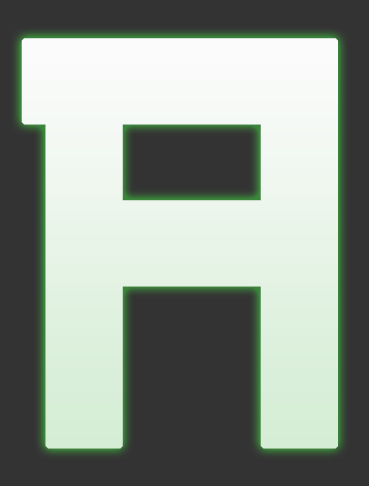
<style>
.page{position:relative;width:369px;height:486px;background:#333333}
.page>*{position:absolute;margin:0}
.t1{font:864px "journey";color:#fafafa;font-weight:bold;scale:0.89 1}
</style>
<div class="page">
<p class="t1" style="left:21px;top:38px;width:317px;height:411px">A</p>
</div>
